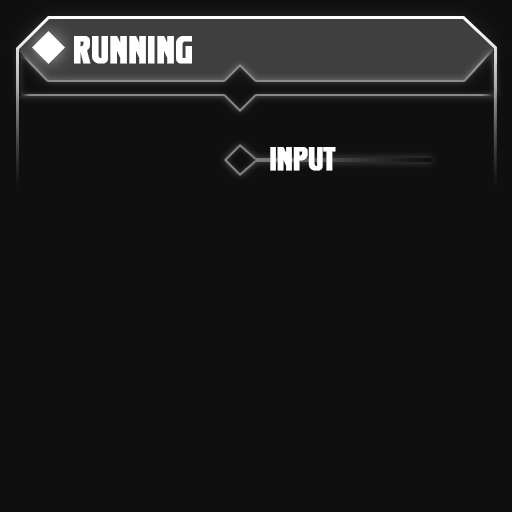
<style>
.page{position:relative;width:512px;height:512px;background:#0f0f0f}
.page>*{position:absolute;margin:0}
.t1{font:35px "Komikazoom";color:#ffffff;text-transform:uppercase;font-weight:bold}
.t2{font:30px "Komikazoom";color:#ffffff;text-transform:uppercase;font-weight:bold}
</style>
<div class="page">
<p class="t1" style="left:74px;top:36px;width:118px;height:28px">RUNNING</p>
<p class="t2" style="left:270px;top:147px;width:66px;height:24px">INput</p>
</div>
